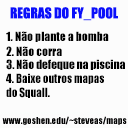
<style>
.page{position:relative;width:128px;height:128px;background:#fcfcfc}
.page>*{position:absolute;margin:0}
.t1{font:13.9px "Impact";color:#0a0ffb;text-transform:uppercase}
.t2{font:11.7px "Impact";color:#000000}
.t3{font:11.7px "Impact";color:#000000;scale:0.93 1}
</style>
<div class="page">
<p class="t1" style="left:10px;top:7px;width:108px;height:14px">regras do fy_pool</p>
<p class="t2" style="left:6px;top:31px;width:103px;height:11px">1. Não plante a bomba</p>
<p class="t2" style="left:6px;top:46px;width:56px;height:10px">2. Não corra</p>
<p class="t2" style="left:6px;top:59px;width:119px;height:11px">3. <span class="t3">N</span>ão defeque na piscina</p>
<p class="t3" style="left:6px;top:73px;width:98px;height:25px"><span class="t2">4. </span>Baixe outros mapas <br>do Squall.</p>
</div>
